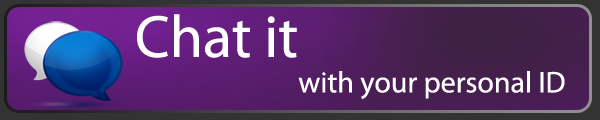
<style>
.page{position:relative;width:600px;height:120px}
.page>*{position:absolute;margin:0}
.t1{font:60px "MyriadPro-Regular";color:#ffffff}
.t2{font:30px "MyriadPro-Regular";color:#ffffff}
</style>
<div class="page">
<p class="t1" style="left:137px;top:14px;width:160px;height:44px">Chat it</p>
<p class="t2" style="left:298px;top:71px;width:267px;height:28px">with your personal ID</p>
</div>
